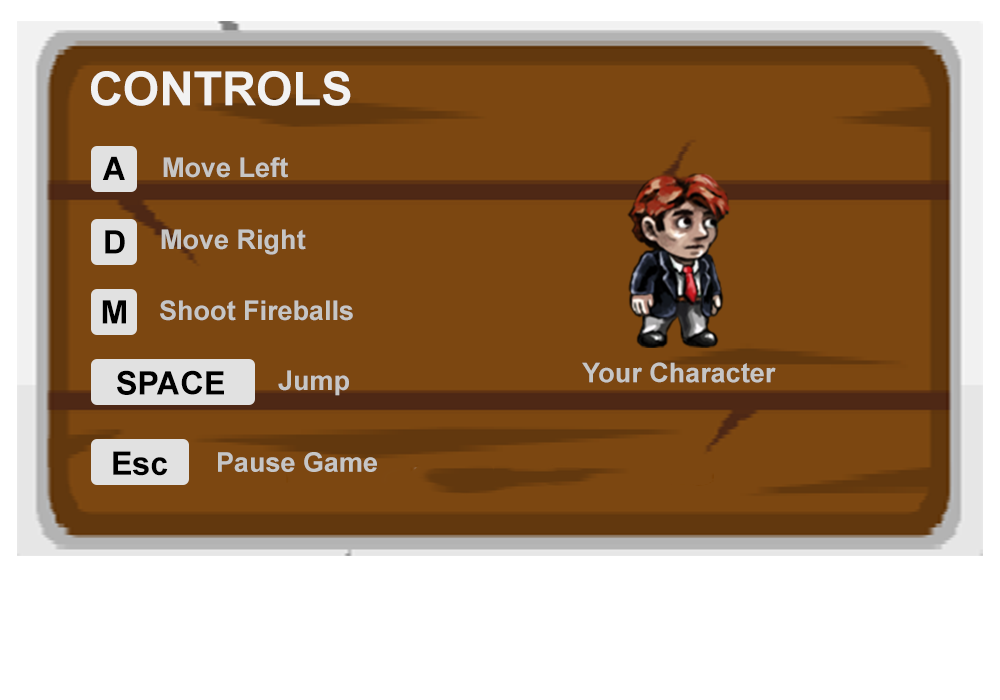
<style>
.page{position:relative;width:1000px;height:700px;background:#7c4711}
.page>*{position:absolute;margin:0}
.t1{font:47px "Arial-BoldMT";color:#f2f2f2}
.t2{font:32.6px "Arial-BoldMT";color:#000000}
.t3{font:27px "Arial-BoldMT";color:#c6c6c6}
</style>
<div class="page">
<p class="t1" style="left:91px;top:71px;width:260px;height:35px">CONTROLS</p>
<p class="t2" style="left:102px;top:156px;width:23px;height:24px">A</p>
<p class="t3" style="left:163px;top:157px;width:125px;height:21px">Move Left</p>
<p class="t2" style="left:105px;top:230px;width:20px;height:24px">D</p>
<p class="t3" style="left:161px;top:229px;width:145px;height:26px">Move Right</p>
<p class="t2" style="left:102px;top:300px;width:24px;height:24px">M</p>
<p class="t3" style="left:160px;top:300px;width:193px;height:21px">Shoot Fireballs</p>
<p class="t3" style="left:582px;top:362px;width:194px;height:21px">Your Character</p>
<p class="t2" style="left:117px;top:370px;width:107px;height:25px">SPACE</p>
<p class="t3" style="left:278px;top:370px;width:71px;height:26px">Jump</p>
<p class="t2" style="left:113px;top:451px;width:55px;height:25px">Esc</p>
<p class="t3" style="left:218px;top:452px;width:159px;height:20px">Pause Game</p>
</div>
